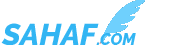
<style>
.page{position:relative;width:175px;height:45px;background:#ffffff}
.page>*{position:absolute;margin:0}
.t1{font:30px "Raleway-ExtraBoldItalic";color:#32b5f3}
.t2{font:16px "Raleway-ExtraBoldItalic";color:#32b5f3}
</style>
<div class="page">
<p class="t1" style="left:1px;top:23px;width:135px;height:23px">SAHAF<span class="t2">.COM</span></p>
</div>
